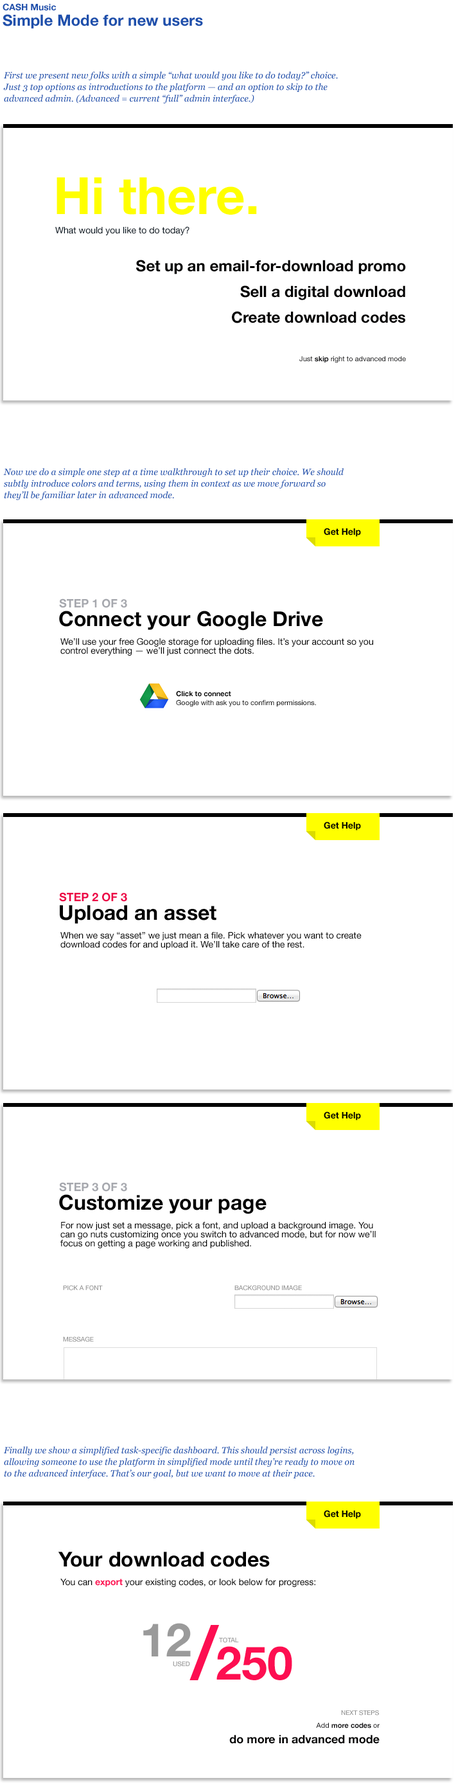
<style>
.page{position:relative;width:456px;height:1785px;background:#ffffff}
.page>*{position:absolute;margin:0}
.t1{font:15.4px/15.4px "HelveticaNeue-Bold";color:#1e4fab}
.t2{font:9px/15.4px "HelveticaNeue-Bold";color:#1e4fab}
.t3{font:9px/11.6px "Georgia-Italic";color:#1e4fab}
.t4{font:51.4px "HelveticaNeue-Bold";color:#ffff00}
.t5{font:9px "HelveticaNeue";color:#000e18}
.t6{font:15.4px/25.7px "HelveticaNeue-Bold";color:#010000}
.t7{font:7.1px/19.3px "HelveticaNeue";color:#121214}
.t8{font:7.1px/19.3px "HelveticaNeue-Bold";color:#121214}
.t9{font:9px "HelveticaNeue-Bold";color:#000000}
.t10{font:11.6px "HelveticaNeue-Bold";color:#a6a8ae}
.t11{font:20.6px "HelveticaNeue-Bold";color:#000000}
.t12{font:9px/9px "HelveticaNeue";color:#000000}
.t13{font:7.1px/9px "HelveticaNeue";color:#000000}
.t14{font:7.1px/9px "HelveticaNeue-Bold";color:#000000}
.t15{font:11.6px "HelveticaNeue-Bold";color:#ec0546}
.t16{font:6.4px "HelveticaNeue";color:#898989}
.t17{font:9px "HelveticaNeue";color:#000000}
.t18{font:9px "HelveticaNeue-Bold";color:#fd0e51}
.t19{font:46.3px "HelveticaNeue-Bold";color:#fd0e51}
.t20{font:46.3px "HelveticaNeue-Bold";color:#9a9a9a}
.t21{font:73.9px "HelveticaNeue-Medium";letter-spacing:-0.025em;color:#fd0e51}
.t22{font:11.6px/15.4px "HelveticaNeue-Bold";color:#010000}
.t23{font:7.1px/15.4px "HelveticaNeue";color:#121214}
.t24{font:7.1px/15.4px "HelveticaNeue-Bold";color:#121214}
</style>
<div class="page">
<p class="t1" style="left:3px;top:3px;width:200px;height:26px"><span class="t2">CASH Music<br></span>Simple Mode for new users</p>
<p class="t3" style="left:3px;top:71px;width:335px;height:33px">First we present new folks with a simple “what would you like to do today?” choice. Just 3 top options as introductions to the platform — and an option to skip to the advanced admin. (Advanced = current “full” admin interface.)</p>
<p class="t4" style="left:57px;top:177px;width:200px;height:38px">Hi there.</p>
<p class="t5" style="left:55px;top:226px;width:135px;height:9px">What would you like to do today?</p>
<p class="t6" style="left:136px;top:260px;width:270px;height:103px;text-align:right">Set up an email-for-download promo<br>Sell a digital download<br>Create download codes<br><br><span class="t7">Just </span><span class="t8">skip </span><span class="t7">right to advanced mode</span></p>
<p class="t3" style="left:3px;top:468px;width:341px;height:32px">Now we do a simple one step at a time walkthrough to set up their choice. We should subtly introduce colors and terms, using them in context as we move forward so they’ll be familiar later in advanced mode.</p>
<p class="t9" style="left:324px;top:528px;width:37px;height:9px">Get Help</p>
<p class="t10" style="left:59px;top:598px;width:68px;height:10px">STEP 1 OF 3</p>
<p class="t11" style="left:59px;top:611px;width:264px;height:20px">Connect your Google Drive</p>
<p class="t12" style="left:60px;top:638px;width:314px;height:18px">We’ll use your free Google storage for uploading files. It’s your account so you control everything — we’ll just connect the dots.</p>
<p class="t13" style="left:176px;top:691px;width:140px;height:16px"><span class="t14">Click to connect<br></span>Google with ask you to confirm permissions.</p>
<p class="t9" style="left:324px;top:822px;width:37px;height:9px">Get Help</p>
<p class="t15" style="left:59px;top:892px;width:68px;height:10px">STEP 2 OF 3</p>
<p class="t11" style="left:60px;top:905px;width:157px;height:19px">Upload an asset</p>
<p class="t12" style="left:60px;top:932px;width:302px;height:18px">When we say “asset” we just mean a file. Pick whatever you want to create download codes for and upload it. We’ll take care of the rest.</p>
<p class="t9" style="left:324px;top:1112px;width:37px;height:8px">Get Help</p>
<p class="t10" style="left:59px;top:1182px;width:68px;height:10px">STEP 3 OF 3</p>
<p class="t11" style="left:59px;top:1194px;width:208px;height:20px">Customize your page</p>
<p class="t12" style="left:60px;top:1222px;width:316px;height:26px">For now just set a message, pick a font, and upload a background image. You can go nuts customizing once you switch to advanced mode, but for now we’ll focus on getting a page working and published.</p>
<p class="t16" style="left:63px;top:1285px;width:40px;height:6px">PICK A FONT</p>
<p class="t16" style="left:235px;top:1285px;width:67px;height:6px">BACKGROUND IMAGE</p>
<p class="t16" style="left:63px;top:1336px;width:31px;height:6px">MESSAGE</p>
<p class="t3" style="left:3px;top:1446px;width:352px;height:33px">Finally we show a simplified task-specific dashboard. This should persist across logins, allowing someone to use the platform in simplified mode until they’re ready to move on to the advanced interface. That’s our goal, but we want to move at their pace.</p>
<p class="t9" style="left:324px;top:1510px;width:37px;height:9px">Get Help</p>
<p class="t11" style="left:58px;top:1552px;width:212px;height:15px">Your download codes</p>
<p class="t17" style="left:60px;top:1579px;width:256px;height:8px">You can <span class="t18">export </span>your existing codes, or look below for progress:</p>
<p class="t19" style="left:143px;top:1623px;width:149px;height:57px"><span class="t20">12</span><span class="t21">/</span>250</p>
<p class="t16" style="left:219px;top:1637px;width:20px;height:6px">TOTAL</p>
<p class="t16" style="left:173px;top:1661px;width:17px;height:6px">USED</p>
<p class="t16" style="left:341px;top:1710px;width:38px;height:6px">NEXT STEPS</p>
<p class="t22" style="left:230px;top:1723px;width:150px;height:21px;text-align:right"><span class="t23">Add </span><span class="t24">more codes </span><span class="t23">or<br></span>do more in advanced mode</p>
</div>
